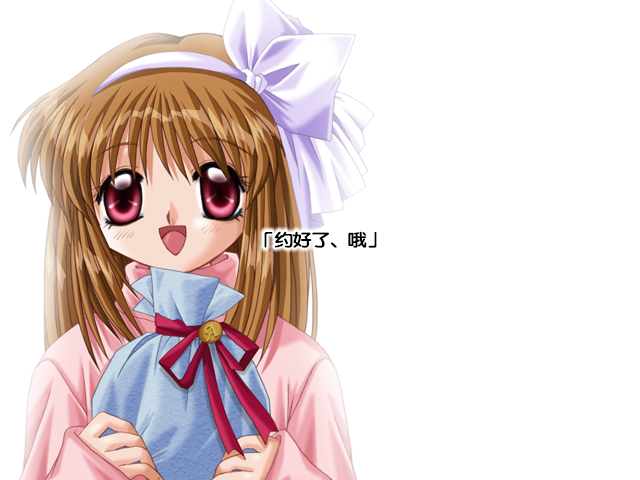
<style>
.page{position:relative;width:640px;height:480px;background:#ffffff}
.page>*{position:absolute;margin:0}
.t1{font:17.6px "FZY4K--GBK1-0";letter-spacing:-0.08em;color:#000000;scale:1.14 1}
</style>
<div class="page">
<p class="t1" style="left:264px;top:231px;width:113px;height:17px">「约好了、哦」</p>
</div>
